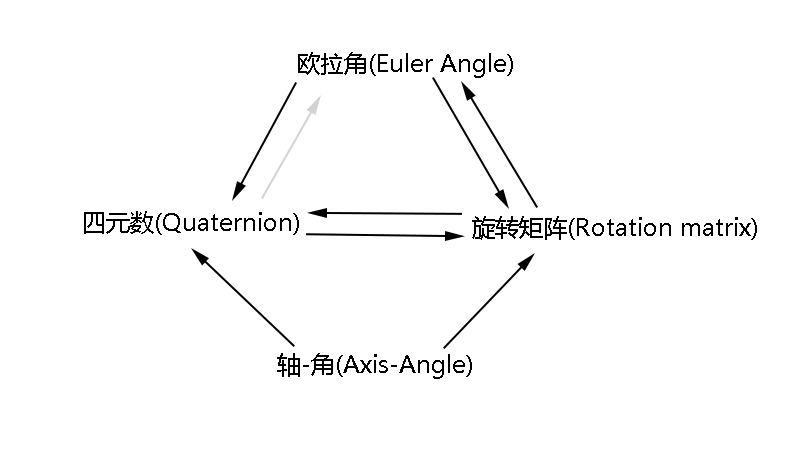
<style>
.page{position:relative;width:799px;height:451px;background:#ffffff}
.page>*{position:absolute;margin:0}
.t1{font:24px "MicrosoftYaHei";color:#000000}
</style>
<div class="page">
<p class="t1" style="left:298px;top:52px;width:215px;height:26px">欧拉角(Euler Angle)</p>
<p class="t1" style="left:84px;top:211px;width:215px;height:24px">四元数(Quaternion)</p>
<p class="t1" style="left:472px;top:216px;width:285px;height:24px">旋转矩阵(Rotation matrix)</p>
<p class="t1" style="left:277px;top:353px;width:195px;height:26px">轴-角(Axis-Angle)</p>
</div>
